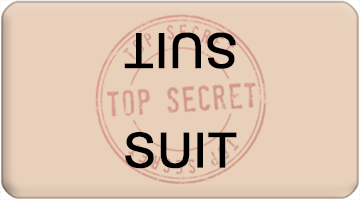
<style>
.page{position:relative;width:360px;height:200px;background:#e8d0bb}
.page>*{position:absolute;margin:0}
.t1{font:48px "ArialMT";color:#000000;font-weight:bold}
</style>
<div class="page">
<p class="t1" style="left:124px;top:32px;width:112px;height:37px;rotate:180deg">SUIT</p>
<p class="t1" style="left:125px;top:132px;width:112px;height:37px">SUIT</p>
</div>
